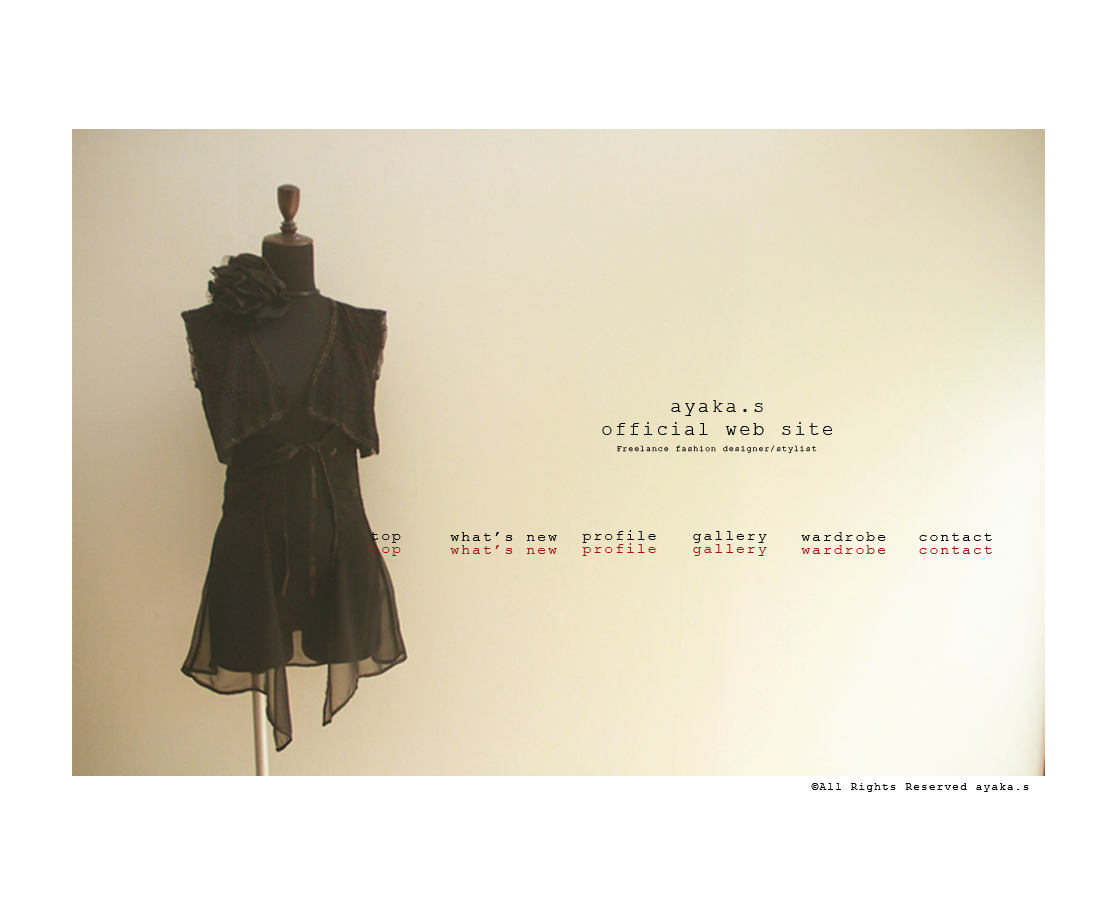
<style>
.page{position:relative;width:1100px;height:900px;background:#ffffff}
.page>*{position:absolute;margin:0}
.t1{font:19.4px "CourierNewPSMT";letter-spacing:0.11em;color:#000000}
.t2{font:8.3px "CourierNewPSMT";letter-spacing:0.11em}
.t3{font:15.3px "CourierNewPSMT";letter-spacing:0.11em;color:#000000}
.t4{font:15.3px "CourierNewPSMT";letter-spacing:0.11em;color:#9b1313}
.t5{font:11px "CourierNewPSMT";letter-spacing:0.11em;color:#000000}
</style>
<div class="page">
<p class="t1" style="left:602px;top:400px;width:230px;height:35px;text-align:center">ayaka.s<br>official web site</p>
<p class="t2" style="left:617px;top:445px;width:200px;height:8px">Freelance fashion designer/stylist</p>
<p class="t3" style="left:371px;top:532px;width:30px;height:11px">top</p>
<p class="t3" style="left:450px;top:532px;width:107px;height:9px">what’s new</p>
<p class="t3" style="left:582px;top:530px;width:74px;height:13px">profile</p>
<p class="t3" style="left:693px;top:531px;width:74px;height:12px">gallery</p>
<p class="t3" style="left:801px;top:532px;width:85px;height:9px">wardrobe</p>
<p class="t3" style="left:919px;top:533px;width:73px;height:8px">contact</p>
<p class="t4" style="left:371px;top:545px;width:30px;height:11px">top</p>
<p class="t4" style="left:450px;top:545px;width:107px;height:9px">what’s new</p>
<p class="t4" style="left:582px;top:543px;width:74px;height:13px">profile</p>
<p class="t4" style="left:693px;top:544px;width:74px;height:12px">gallery</p>
<p class="t4" style="left:801px;top:545px;width:85px;height:9px">wardrobe</p>
<p class="t4" style="left:919px;top:546px;width:73px;height:8px">contact</p>
<p class="t5" style="left:811px;top:783px;width:218px;height:9px">©All Rights Reserved ayaka.s</p>
</div>
